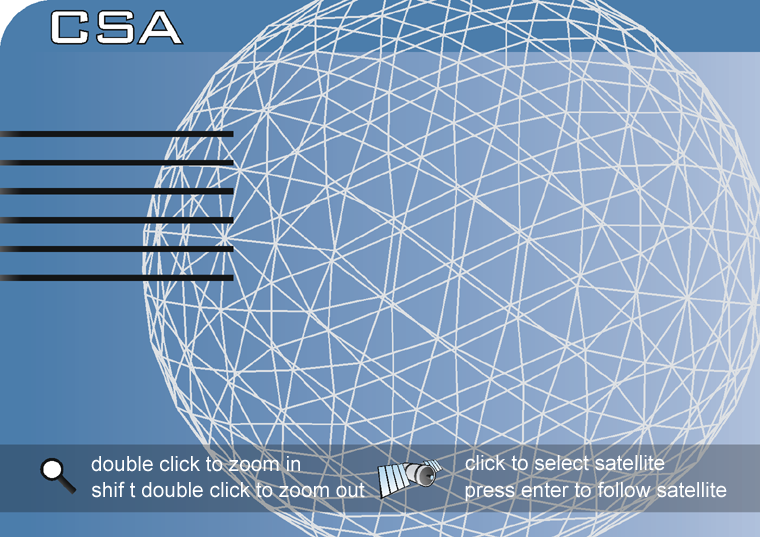
<style>
.page{position:relative;width:760px;height:537px}
.page>*{position:absolute;margin:0}
.t1{font:20.8px "ArialMT";color:#ffffff}
</style>
<div class="page">
<p class="t1" style="left:91px;top:456px;width:209px;height:16px">double click to zoom in</p>
<p class="t1" style="left:465px;top:455px;width:200px;height:16px">click to select satellite</p>
<p class="t1" style="left:92px;top:481px;width:273px;height:17px">shif t double click to zoom out</p>
<p class="t1" style="left:465px;top:481px;width:262px;height:21px">press enter to follow satellite</p>
</div>
